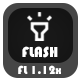
<style>
.page{position:relative;width:80px;height:80px;background:#464646}
.page>*{position:absolute;margin:0}
.t1{font:15px "Bauhaus93";color:#ffffff}
.t2{font:12px "Bauhaus93";color:#ffffff}
</style>
<div class="page">
<p class="t1" style="left:22px;top:46px;width:36px;height:12px">FLASH</p>
<p class="t2" style="left:18px;top:65px;width:43px;height:9px">FL 1.12x</p>
</div>
